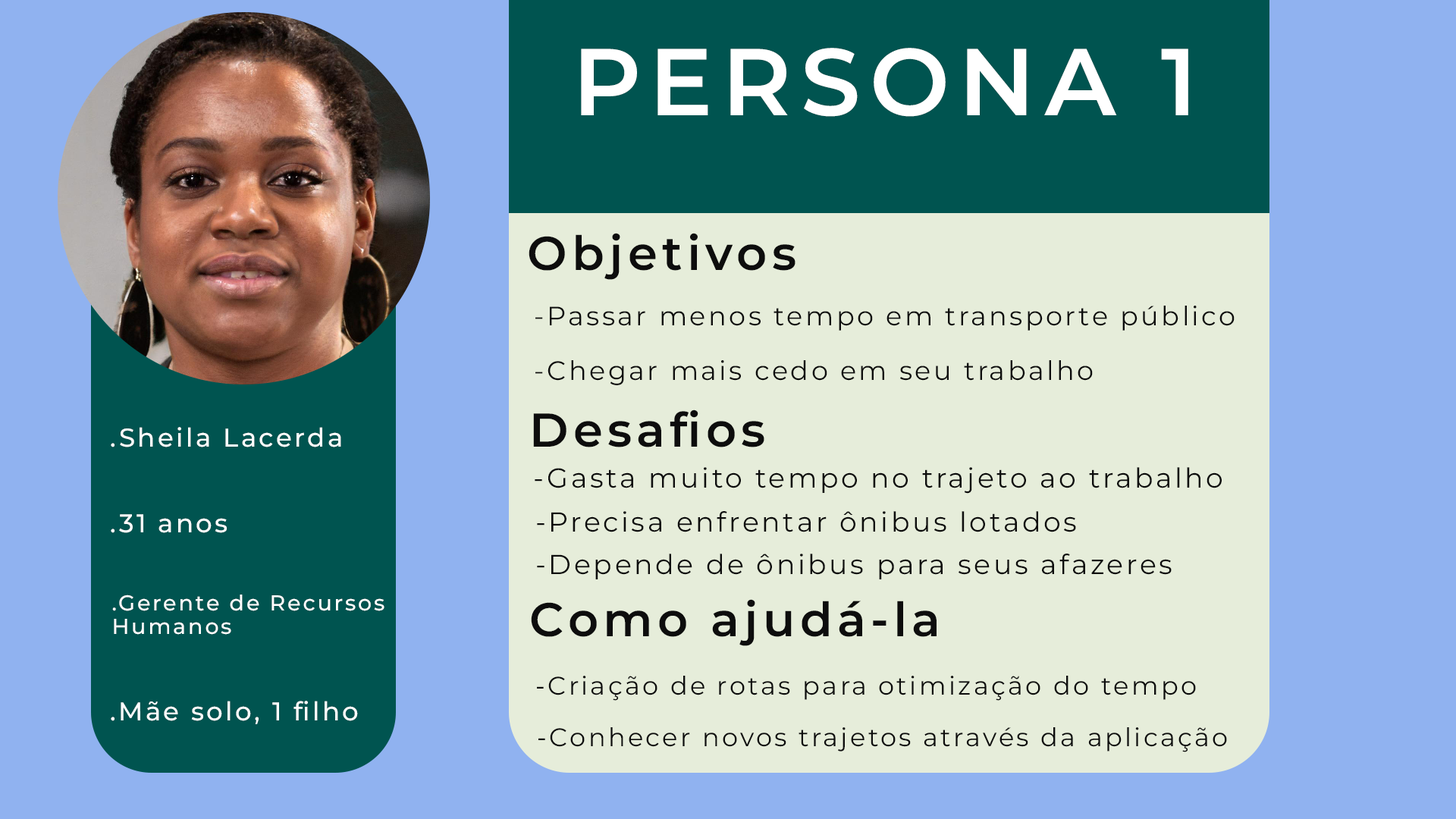
<style>
.page{position:relative;width:1456px;height:819px;background:#90b2f0}
.page>*{position:absolute;margin:0}
.t1{font:94.6px "MontserratRoman-SemiBold";letter-spacing:0.1em;color:#ffffff}
.t2{font:47.3px "MontserratRoman-SemiBold";letter-spacing:0.1em;color:#0d0d0d}
.t3{font:26.6px "MontserratRoman-Regular";letter-spacing:0.1em;color:#0d0d0d}
.t4{font:25.8px "MontserratRoman-Medium";letter-spacing:0.1em;color:#ffffff}
.t5{font:27.4px "MontserratRoman-Regular";letter-spacing:0.1em;color:#0d0d0d}
.t6{font:21.6px/23.3px "MontserratRoman-Medium";letter-spacing:0.1em;color:#ffffff}
.t7{font:25.5px "MontserratRoman-Regular";letter-spacing:0.1em;color:#0d0d0d}
</style>
<div class="page">
<p class="t1" style="left:581px;top:48px;width:607px;height:69px">PERSONA 1</p>
<p class="t2" style="left:529px;top:233px;width:266px;height:47px">Objetivos</p>
<p class="t3" style="left:535px;top:306px;width:700px;height:25px">-Passar menos tempo em transporte público</p>
<p class="t3" style="left:535px;top:360px;width:558px;height:25px">-Chegar mais cedo em seu trabalho</p>
<p class="t2" style="left:533px;top:409px;width:231px;height:38px">Desafios</p>
<p class="t4" style="left:111px;top:427px;width:230px;height:20px">.Sheila Lacerda</p>
<p class="t5" style="left:535px;top:467px;width:687px;height:27px">-Gasta muito tempo no trajeto ao trabalho</p>
<p class="t4" style="left:111px;top:514px;width:116px;height:19px">.31 anos</p>
<p class="t5" style="left:537px;top:511px;width:539px;height:21px">-Precisa enfrentar ônibus lotados</p>
<p class="t5" style="left:537px;top:554px;width:635px;height:25px">-Depende de ônibus para seus afazeres</p>
<p class="t6" style="left:112px;top:595px;width:272px;height:40px">.Gerente de Recursos<br>Humanos</p>
<p class="t2" style="left:531px;top:599px;width:406px;height:47px">Como ajudá-la</p>
<p class="t7" style="left:537px;top:676px;width:659px;height:25px">-Criação de rotas para otimização do tempo</p>
<p class="t4" style="left:111px;top:701px;width:247px;height:23px">.Mãe solo, 1 filho</p>
<p class="t7" style="left:538px;top:727px;width:689px;height:25px">-Conhecer novos trajetos através da aplicação</p>
</div>
